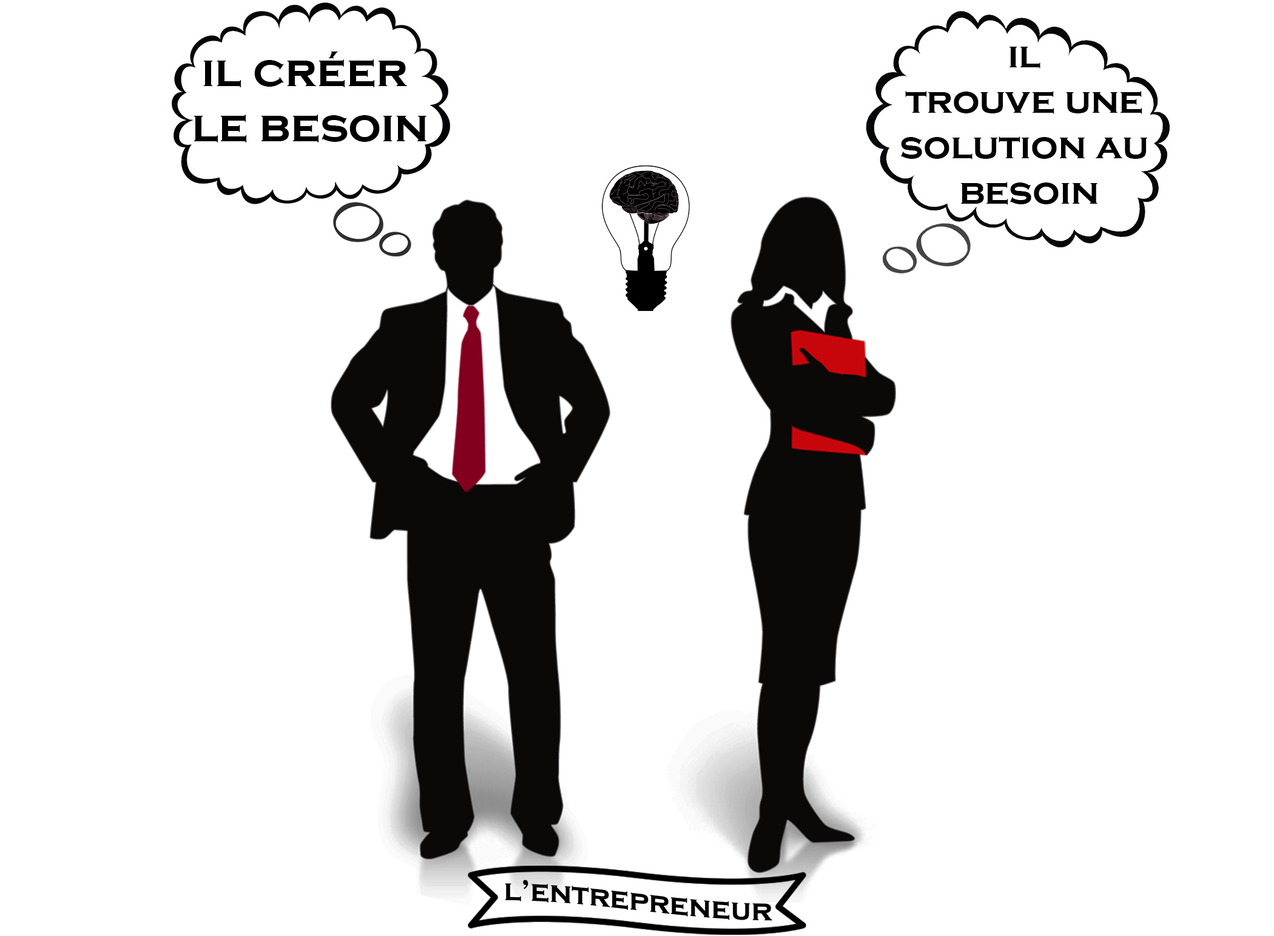
<style>
.page{position:relative;width:1274px;height:936px;background:#ffffff}
.page>*{position:absolute;margin:0}
.t1{font:46.1px "CopperplateGothic-Bold";color:#000000}
.t2{font:38px "CopperplateGothic-Bold";color:#000000}
.t3{font:30.1px "CopperplateGothic-Bold";color:#000000}
</style>
<div class="page">
<p class="t1" style="left:193px;top:52px;width:233px;height:91px;text-align:center">il créer <br>le besoin</p>
<p class="t2" style="left:901px;top:47px;width:246px;height:158px;text-align:center">il <br>trouve une <br>solution au <br>besoin</p>
<p class="t3" style="left:505px;top:880px;width:267px;height:41px">l’entrepreneur</p>
</div>
